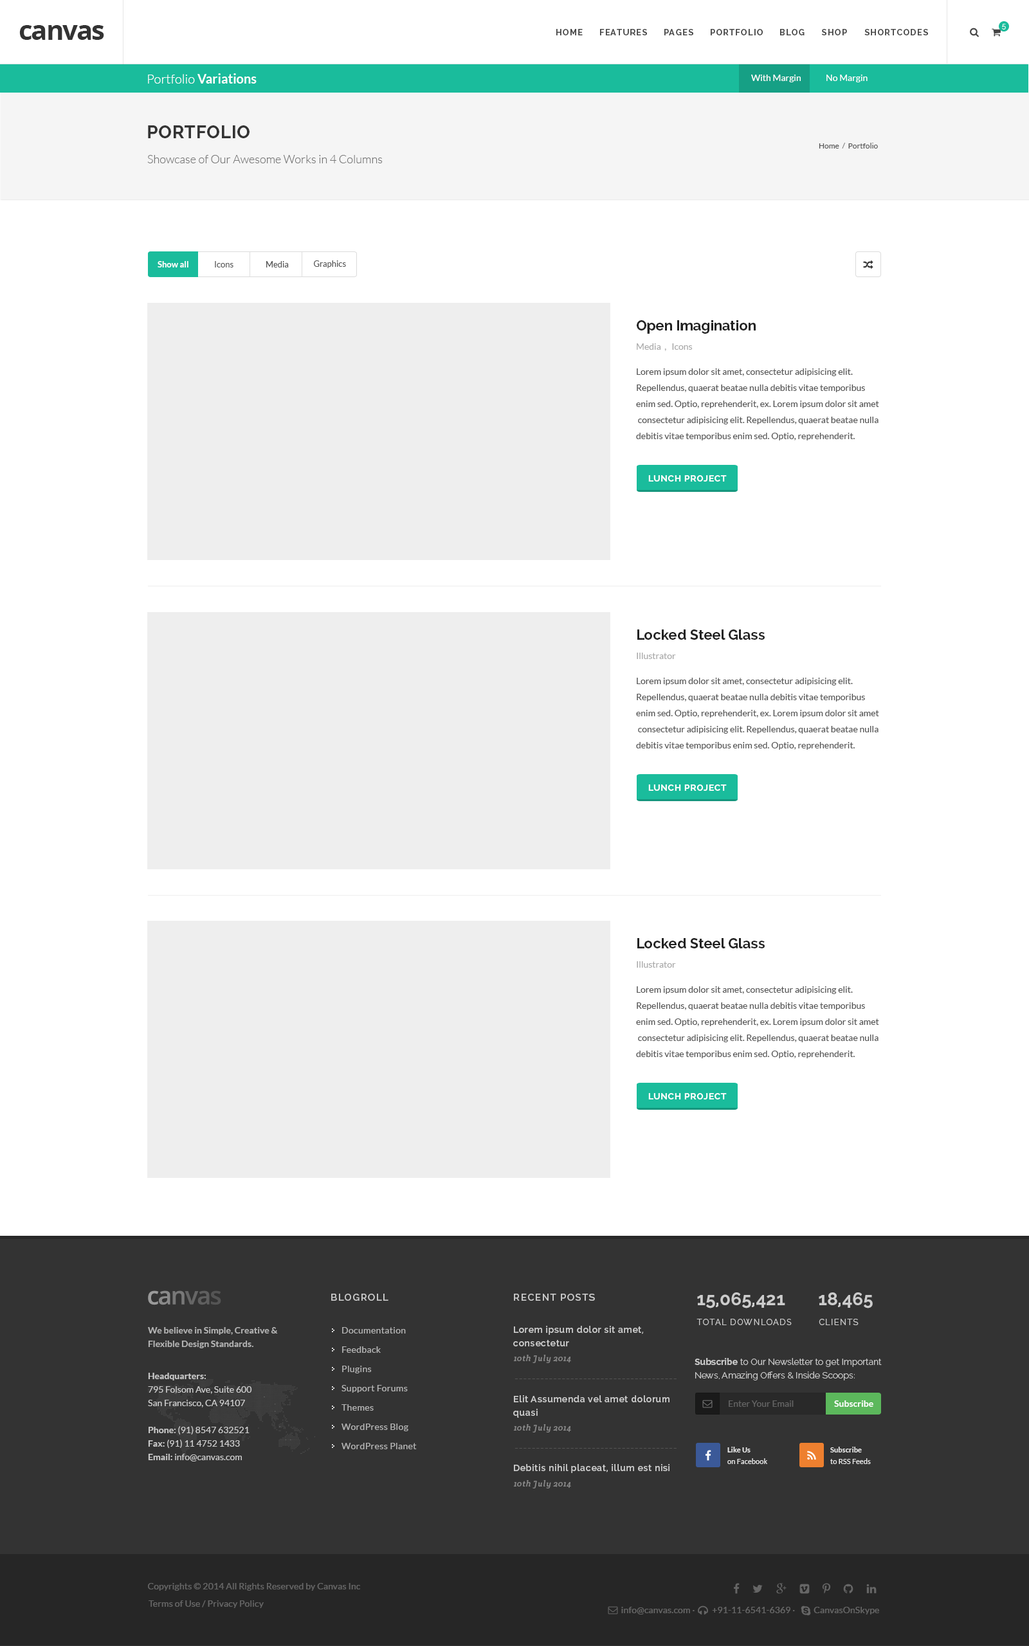
<style>
.page{position:relative;width:1029px;height:1646px;background:#ffffff}
.page>*{position:absolute;margin:0}
.t1{font:27px "OpenSans-Bold";letter-spacing:-0.05em;color:#333333}
.t2{font:8.4px "Raleway-Bold";letter-spacing:0.1em;color:#444444}
.t3{font:7.1px "Raleway-Light";letter-spacing:0.1em;color:#ffffff}
.t4{font:12.9px "Lato-Bold";color:#ffffff}
.t5{font:12.9px "Lato-Light";color:#ffffff}
.t6{font:9px "Lato-Regular";color:#ffffff}
.t7{font:18px "Raleway-Bold";letter-spacing:0.025em;color:#333333;text-transform:uppercase}
.t8{font:7.7px "Lato-Regular";color:#555555}
.t9{font:7.7px "Lato-Regular";color:#777777}
.t10{font:11.6px "Lato-Light";color:#777777}
.t11{font:8.4px "Lato-Bold";color:#ffffff}
.t12{font:8.4px "Lato-Regular";color:#555555}
.t13{font:14.1px "Raleway-Bold";color:#222222}
.t14{font:9px "Lato-Regular";color:#aaaaaa}
.t15{font:9px/16.1px "Lato-Regular";color:#555555}
.t16{font:9px "Raleway-Bold";letter-spacing:0.05em;color:#ffffff}
.t17{font:9.6px "Raleway-SemiBold";letter-spacing:0.1em;color:#cccccc}
.t18{font:18px "Raleway-Bold";color:#cccccc}
.t19{font:9px/13.5px "Raleway-SemiBold";letter-spacing:0.05em;color:#cccccc}
.t20{font:8.4px "Raleway-Regular";letter-spacing:0.1em;color:#cacaca;text-transform:uppercase}
.t21{font:9px/13.5px "Lato-Bold";color:#cccccc}
.t22{font:9px/19.3px "Lato-Regular";letter-spacing:0.025em;color:#cccccc}
.t23{font:8.4px "CreteRound-Italic";letter-spacing:0.05em;color:#888888}
.t24{font:9px/13.5px "Raleway-Light";color:#cccccc}
.t25{font:9px/13.5px "Raleway-Bold";color:#cccccc}
.t26{font:9px/13.5px "Lato-Regular";color:#cccccc}
.t27{font:11.6px "Lato-Italic";letter-spacing:0.05em;color:#545454}
.t28{font:9px "Lato-Regular";color:#777777}
.t29{font:9px "Lato-Bold";color:#ffffff}
.t30{font:7.1px/11.6px "Lato-Regular";letter-spacing:0.01em;color:#eeeeee}
.t31{font:7.1px/11.6px "Lato-Bold";letter-spacing:0.01em;color:#eeeeee}
.t32{font:9px "Raleway-SemiBold";letter-spacing:0.05em;color:#cccccc}
.t33{font:9px "Lato-Regular";letter-spacing:0.01em;color:#666666}
</style>
<div class="page">
<p class="t1" style="left:19px;top:25px;width:85px;height:15px">canvas</p>
<p class="t2" style="left:556px;top:29px;width:26px;height:6px">HOME</p>
<p class="t2" style="left:600px;top:29px;width:47px;height:6px">FEATURES</p>
<p class="t2" style="left:664px;top:29px;width:29px;height:6px">PAGES</p>
<p class="t2" style="left:710px;top:29px;width:52px;height:6px">PORTFOLIO</p>
<p class="t2" style="left:780px;top:29px;width:24px;height:6px">BLOG</p>
<p class="t2" style="left:822px;top:29px;width:25px;height:6px">SHOP</p>
<p class="t2" style="left:864px;top:29px;width:64px;height:6px">SHORTCODES</p>
<p class="t3" style="left:1002px;top:24px;width:3px;height:6px">5</p>
<p class="t4" style="left:148px;top:73px;width:108px;height:11px"><span class="t5">Portfolio </span>Variations</p>
<p class="t6" style="left:751px;top:75px;width:116px;height:7px">With Margin    No Margin</p>
<p class="t7" style="left:148px;top:125px;width:101px;height:13px">Portfolio</p>
<p class="t8" style="left:818px;top:143px;width:60px;height:5px">Home  <span class="t9">/ </span> Portfolio</p>
<p class="t10" style="left:147px;top:155px;width:235px;height:8px">Showcase of Our Awesome Works in 4 Columns</p>
<p class="t11" style="left:158px;top:261px;width:30px;height:6px">Show all</p>
<p class="t12" style="left:215px;top:261px;width:18px;height:6px">Icons</p>
<p class="t12" style="left:266px;top:261px;width:23px;height:6px">Media</p>
<p class="t12" style="left:314px;top:260px;width:32px;height:8px">Graphics</p>
<p class="t13" style="left:636px;top:320px;width:119px;height:14px">Open Imagination</p>
<p class="t14" style="left:636px;top:343px;width:56px;height:8px">Media  ,   Icons</p>
<p class="t15" style="left:636px;top:368px;width:243px;height:72px">Lorem ipsum dolor sit amet, consectetur adipisicing elit.<br>Repellendus, quaerat beatae nulla debitis vitae temporibus<br>enim sed. Optio, reprehenderit, ex. Lorem ipsum dolor sit amet<br> consectetur adipisicing elit. Repellendus, quaerat beatae nulla<br>debitis vitae temporibus enim sed. Optio, reprehenderit.</p>
<p class="t16" style="left:648px;top:475px;width:78px;height:7px">LUNCH PROJECT</p>
<p class="t13" style="left:637px;top:629px;width:127px;height:11px">Locked Steel Glass</p>
<p class="t14" style="left:636px;top:652px;width:40px;height:7px">Illustrator</p>
<p class="t15" style="left:636px;top:678px;width:243px;height:72px">Lorem ipsum dolor sit amet, consectetur adipisicing elit.<br>Repellendus, quaerat beatae nulla debitis vitae temporibus<br>enim sed. Optio, reprehenderit, ex. Lorem ipsum dolor sit amet<br> consectetur adipisicing elit. Repellendus, quaerat beatae nulla<br>debitis vitae temporibus enim sed. Optio, reprehenderit.</p>
<p class="t16" style="left:648px;top:784px;width:78px;height:7px">LUNCH PROJECT</p>
<p class="t13" style="left:637px;top:938px;width:127px;height:10px">Locked Steel Glass</p>
<p class="t14" style="left:636px;top:961px;width:40px;height:7px">Illustrator</p>
<p class="t15" style="left:636px;top:986px;width:243px;height:72px">Lorem ipsum dolor sit amet, consectetur adipisicing elit.<br>Repellendus, quaerat beatae nulla debitis vitae temporibus<br>enim sed. Optio, reprehenderit, ex. Lorem ipsum dolor sit amet<br> consectetur adipisicing elit. Repellendus, quaerat beatae nulla<br>debitis vitae temporibus enim sed. Optio, reprehenderit.</p>
<p class="t16" style="left:648px;top:1093px;width:78px;height:6px">LUNCH PROJECT</p>
<p class="t17" style="left:331px;top:1293px;width:57px;height:7px">BLOGROLL</p>
<p class="t17" style="left:514px;top:1293px;width:81px;height:7px">RECENT POSTS</p>
<p class="t18" style="left:697px;top:1292px;width:88px;height:16px">15,065,421</p>
<p class="t18" style="left:818px;top:1292px;width:54px;height:16px">18,465</p>
<p class="t19" style="left:513px;top:1326px;width:130px;height:20px">Lorem ipsum dolor sit amet,<br>consectetur</p>
<p class="t20" style="left:696px;top:1318px;width:95px;height:7px">TOTAL Downloads</p>
<p class="t20" style="left:818px;top:1318px;width:40px;height:7px">CLIENTS</p>
<p class="t21" style="left:148px;top:1327px;width:130px;height:21px;opacity:0.8">We believe in Simple, Creative &amp;<br>Flexible Design Standards.</p>
<p class="t22" style="left:341px;top:1327px;width:76px;height:122px;opacity:0.8">Documentation<br>Feedback<br>Plugins<br>Support Forums<br>Themes<br>WordPress Blog<br>WordPress Planet</p>
<p class="t23" style="left:513px;top:1354px;width:58px;height:9px">10th July 2014</p>
<p class="t24" style="left:694px;top:1358px;width:187px;height:22px"><span class="t25">Subscribe</span> to Our Newsletter to get Important<br>News, Amazing Offers &amp; Inside Scoops:</p>
<p class="t26" style="left:148px;top:1372px;width:104px;height:89px"><span class="t21">Headquarters:<br></span>795 Folsom Ave, Suite 600<br>San Francisco, CA 94107<br><span class="t21"><br>Phone: </span>(91) 8547 632521<br><span class="t21">Fax: </span>(91) 11 4752 1433<br><span class="t21">Email: </span>info@canvas.com</p>
<p class="t27" style="left:514px;top:1378px;width:162px;height:1px">--------------------------------------</p>
<p class="t19" style="left:513px;top:1395px;width:156px;height:23px">Elit Assumenda vel amet dolorum<br>quasi</p>
<p class="t28" style="left:728px;top:1400px;width:65px;height:7px;opacity:0.7">Enter Your Email</p>
<p class="t29" style="left:834px;top:1400px;width:39px;height:7px">Subscribe</p>
<p class="t23" style="left:513px;top:1424px;width:58px;height:8px">10th July 2014</p>
<p class="t27" style="left:514px;top:1448px;width:162px;height:0px">--------------------------------------</p>
<p class="t30" style="left:727px;top:1446px;width:40px;height:18px"><span class="t31">Like Us<br></span>on Facebook</p>
<p class="t30" style="left:830px;top:1446px;width:40px;height:18px"><span class="t31">Subscribe<br></span>to RSS Feeds</p>
<p class="t32" style="left:514px;top:1464px;width:155px;height:9px">Debitis nihil placeat, illum est nisi</p>
<p class="t23" style="left:513px;top:1480px;width:58px;height:8px">10th July 2014</p>
<p class="t33" style="left:148px;top:1583px;width:212px;height:7px">Copyrights © 2014 All Rights Reserved by Canvas Inc</p>
<p class="t33" style="left:148px;top:1600px;width:116px;height:8px">Terms of Use / Privacy Policy</p>
<p class="t33" style="left:621px;top:1607px;width:258px;height:7px">info@canvas.com ·   +91-11-6541-6369 ·        CanvasOnSkype</p>
</div>
